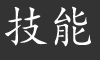
<style>
.page{position:relative;width:100px;height:60px;background:#333333}
.page>*{position:absolute;margin:0}
.t1{font:46.7px "KaiTi";color:#ffffff}
</style>
<div class="page">
<p class="t1" style="left:5px;top:6px;width:86px;height:41px">技能</p>
</div>
